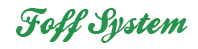
<style>
.page{position:relative;width:198px;height:49px;background:#ffffff}
.page>*{position:absolute;margin:0}
.t1{font:36px "BallparkWeiner";color:#26934c}
</style>
<div class="page">
<p class="t1" style="left:16px;top:8px;width:172px;height:35px">Foff System</p>
</div>
